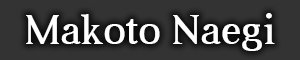
<style>
.page{position:relative;width:300px;height:60px;background:#333333}
.page>*{position:absolute;margin:0}
.t1{font:42px "Aver";color:#ffffff}
</style>
<div class="page">
<p class="t1" style="left:26px;top:13px;width:249px;height:38px">Makoto Naegi</p>
</div>
